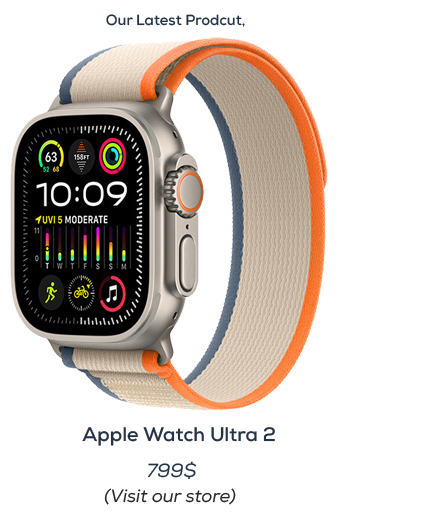
<style>
.page{position:relative;width:444px;height:514px;background:#ffffff}
.page>*{position:absolute;margin:0}
.t1{font:14.7px "Nexa-Bold";color:#243446}
.t2{font:19.5px "Nexa-Bold";color:#243446}
.t3{font:19.1px "Nexa-Regular";color:#243446}
.t4{font:18px "Nexa-Regular";color:#282828}
</style>
<div class="page">
<p class="t1" style="left:106px;top:14px;width:139px;height:13px">Our Latest Prodcut,</p>
<p class="t2" style="left:82px;top:427px;width:193px;height:19px">Apple Watch Ultra 2</p>
<p class="t3" style="left:147px;top:461px;width:50px;height:18px">799$</p>
<p class="t4" style="left:104px;top:488px;width:132px;height:17px">(Visit our store)</p>
</div>
